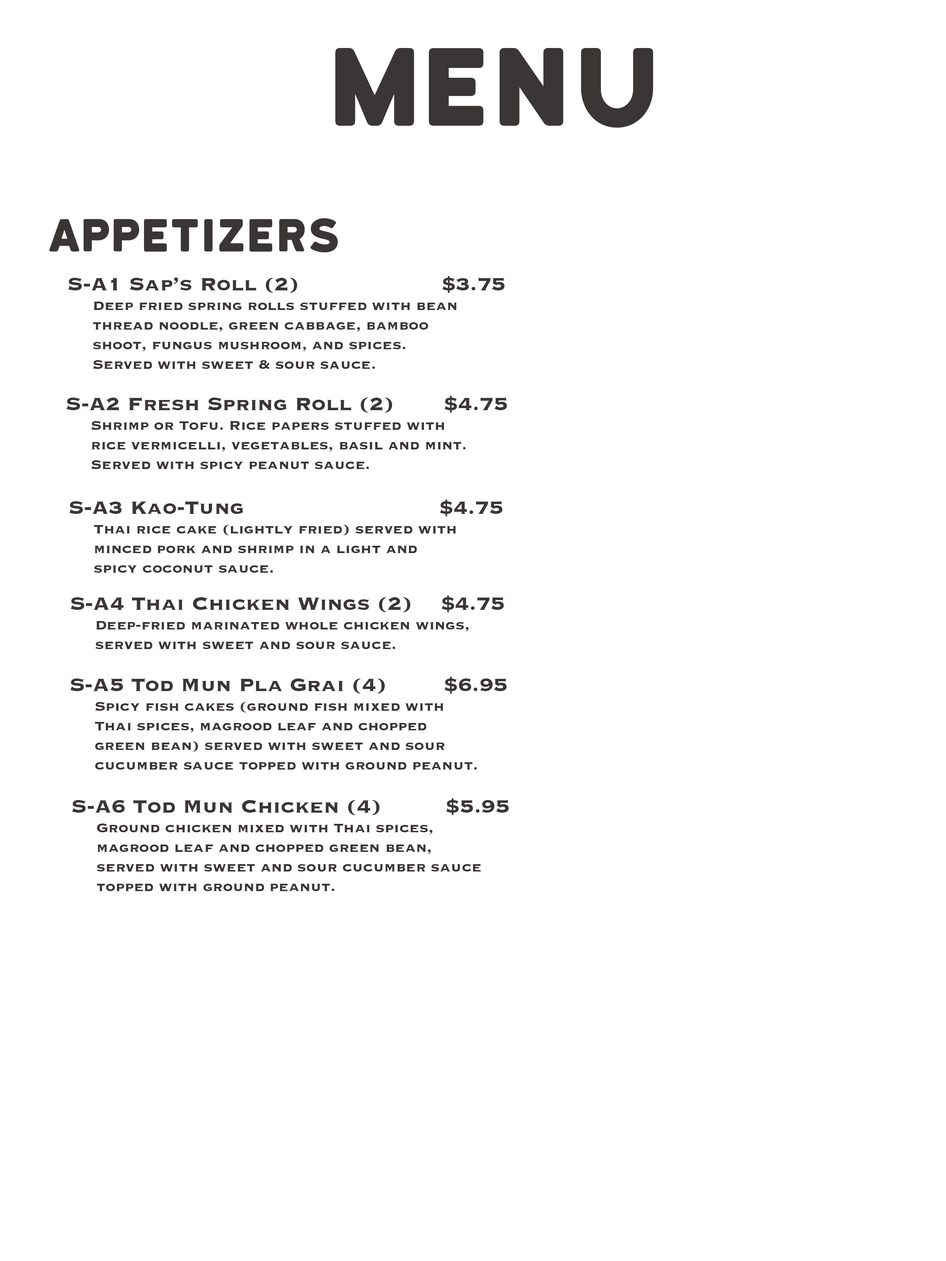
<style>
.page{position:relative;width:946px;height:1261px;background:#ffffff}
.page>*{position:absolute;margin:0}
.t1{font:105.1px "KatahdinRound-Regular";color:#3b3636}
.t2{font:43.8px "KatahdinRound-Regular";color:#3b3636}
.t3{font:16.3px "Copperplate-Bold";color:#3b3636}
.t4{font:23.4px "Copperplate-Bold";color:#3b3636}
</style>
<div class="page">
<p class="t1" style="left:335px;top:48px;width:318px;height:80px">Menu</p>
<p class="t2" style="left:49px;top:218px;width:289px;height:35px">Appetizers</p>
<p class="t3" style="left:68px;top:276px;width:436px;height:93px"><span class="t4">S-A1 Sap’s Roll (2)                    $3.75<br></span>  Deep fried spring rolls stuffed with bean <br>  thread noodle, green cabbage, bamboo <br>  shoot, fungus mushroom, and spices.<br>   Served with sweet &amp; sour sauce.</p>
<p class="t3" style="left:66px;top:396px;width:441px;height:73px"><span class="t4">S-A2 Fresh Spring Roll (2)       $4.75<br></span>   Shrimp or Tofu. Rice papers stuffed with <br>   rice vermicelli, vegetables, basil and mint.<br>   Served with spicy peanut sauce.</p>
<p class="t3" style="left:69px;top:499px;width:433px;height:74px"><span class="t4">S-A3 Kao-Tung                         $4.75<br></span>   Thai rice cake (lightly fried) served with <br>  minced pork and shrimp in a light and <br>  spicy coconut sauce.</p>
<p class="t3" style="left:70px;top:595px;width:434px;height:54px"><span class="t4">S-A4 Thai Chicken Wings (2)    $4.75<br></span>  Deep-fried marinated whole chicken wings,<br>  served with sweet and sour sauce.</p>
<p class="t3" style="left:70px;top:677px;width:436px;height:93px"><span class="t4">S-A5 Tod Mun Pla Grai (4)        $6.95<br></span>  Spicy fish cakes (ground fish mixed with <br>  Thai spices, magrood leaf and chopped <br>  green bean) served with sweet and sour <br>  cucumber sauce topped with ground peanut.</p>
<p class="t3" style="left:72px;top:798px;width:437px;height:93px"><span class="t4">S-A6 Tod Mun Chicken (4)         $5.95<br></span>   Ground chicken mixed with Thai spices, <br>  magrood leaf and chopped green bean, <br>  served with sweet and sour cucumber sauce <br>  topped with ground peanut.</p>
</div>
